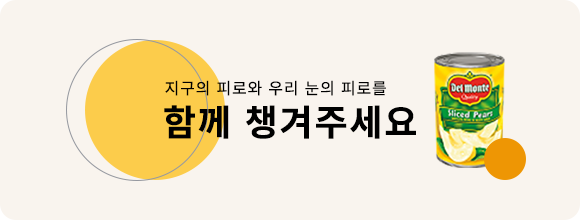
<style>
.page{position:relative;width:580px;height:220px;background:#f9f4ee}
.page>*{position:absolute;margin:0}
.t1{font:16px "NotoSansCJKkr-Regular";letter-spacing:0.05em;color:#000000;text-transform:uppercase}
.t2{font:36px "NotoSansCJKkr-Bold";letter-spacing:0.05em;color:#000000;text-transform:uppercase}
</style>
<div class="page">
<p class="t1" style="left:165px;top:80px;width:221px;height:16px">지구의 피로와 우리 눈의 피로를</p>
<p class="t2" style="left:164px;top:105px;width:252px;height:34px">함께 챙겨주세요</p>
</div>
